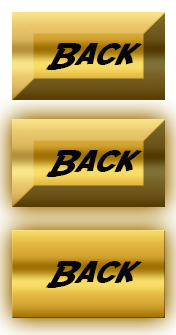
<style>
.page{position:relative;width:176px;height:335px}
.page>*{position:absolute;margin:0}
.t1{font:30px "SFFedora";letter-spacing:-0.005em;color:#060606;scale:1.2 1}
</style>
<div class="page">
<p class="t1" style="left:45px;top:43px;width:98px;height:27px">Back</p>
<p class="t1" style="left:45px;top:150px;width:98px;height:27px">Back</p>
<p class="t1" style="left:45px;top:261px;width:98px;height:27px">Back</p>
</div>
